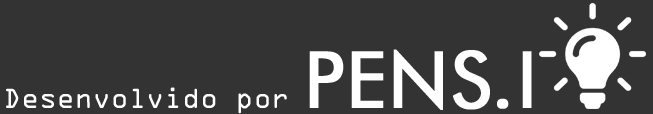
<style>
.page{position:relative;width:653px;height:114px;background:#333333}
.page>*{position:absolute;margin:0}
.t1{font:77.8px "FuturaBT-Book";color:#ffffff;font-weight:bold}
.t2{font:29.6px "OCRAExtended";color:#ffffff}
</style>
<div class="page">
<p class="t1" style="left:309px;top:49px;width:223px;height:61px">PENS.I</p>
<p class="t2" style="left:6px;top:87px;width:281px;height:27px">Desenvolvido por</p>
</div>
